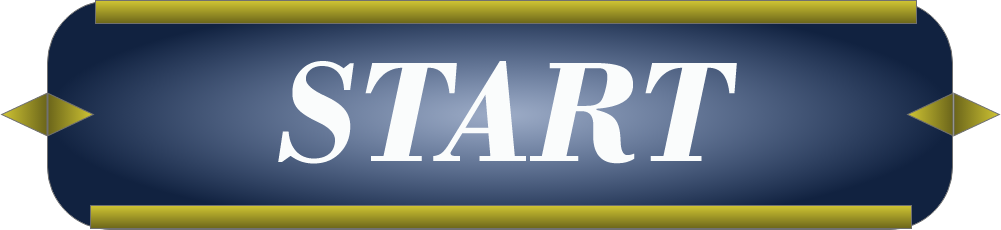
<style>
.page{position:relative;width:1001px;height:230px}
.page>*{position:absolute;margin:0}
.t1{font:150px "BodoniBT-BoldItalic";color:#fafcfc}
</style>
<div class="page">
<p class="t1" style="left:278px;top:61px;width:459px;height:103px">START</p>
</div>
